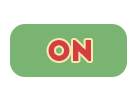
<style>
.page{position:relative;width:140px;height:100px;background:#ffffff}
.page>*{position:absolute;margin:0}
.t1{font:28px "BigJohn";color:#d33e43}
</style>
<div class="page">
<p class="t1" style="left:48px;top:40px;width:43px;height:21px">on</p>
</div>
